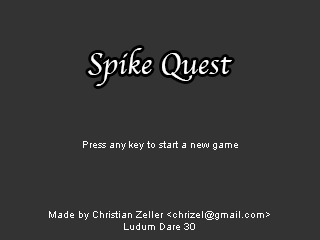
<style>
.page{position:relative;width:320px;height:240px;background:#333333}
.page>*{position:absolute;margin:0}
.t1{font:30px "Apple-Chancery";color:#fefefe}
.t2{font:10px "ArialMT";color:#fefefe}
</style>
<div class="page">
<p class="t1" style="left:88px;top:48px;width:144px;height:38px">Spike Quest</p>
<p class="t2" style="left:83px;top:141px;width:155px;height:9px">Press any key to start a new game</p>
<p class="t2" style="left:49px;top:211px;width:221px;height:9px">Made by Christian Zeller &lt;chrizel@gmail.com&gt;</p>
<p class="t2" style="left:124px;top:223px;width:71px;height:7px">Ludum Dare 30</p>
</div>
